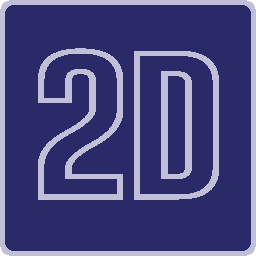
<style>
.page{position:relative;width:256px;height:256px;background:#2a2a69}
.page>*{position:absolute;margin:0}
.t1{font:149.8px "GoboldHollowBold";letter-spacing:-0.08em;color:#bfbfd8;scale:1.33 1}
</style>
<div class="page">
<p class="t1" style="left:38px;top:48px;width:181px;height:152px">2D</p>
</div>
